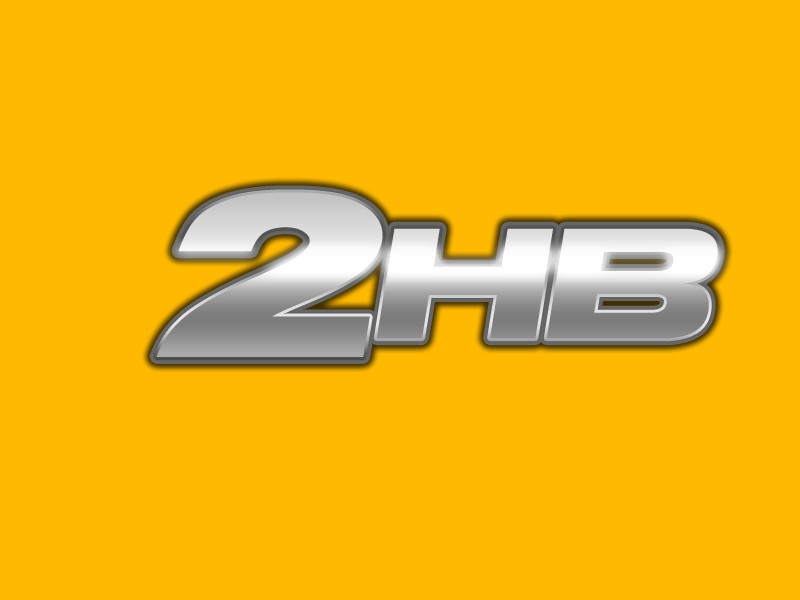
<style>
.page{position:relative;width:800px;height:600px;background:#ffba00}
.page>*{position:absolute;margin:0}
.t1{font:176.2px "TSBlock-Bold";font-style:italic;scale:0.92 1}
.t2{font:264.4px "TSBlock-Bold";font-style:italic;scale:0.92 1}
</style>
<div class="page">
<p class="t1" style="left:156px;top:192px;width:562px;height:165px"><span class="t2">2</span>HB</p>
<p class="t1" style="left:156px;top:192px;width:562px;height:165px"><span class="t2">2</span>HB</p>
</div>
